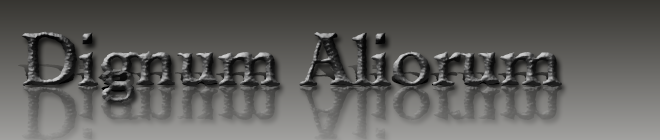
<style>
.page{position:relative;width:660px;height:140px}
.page>*{position:absolute;margin:0}
.t1{font:72px "WeatheredSF";color:#000000}
.t2{font:29.1px "WeatheredSF";color:#000000;scale:2.47 1}
</style>
<div class="page">
<p class="t1" style="left:21px;top:31px;width:541px;height:72px">Dignum Aliorum</p>
<p class="t2" style="left:18px;top:64px;width:544px;height:28px">Dignum Aliorum</p>
<p class="t1" style="left:21px;top:69px;width:541px;height:72px;opacity:0.84">Dignum Aliorum</p>
</div>
